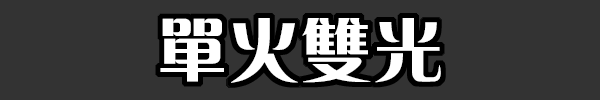
<style>
.page{position:relative;width:600px;height:100px;background:#333333}
.page>*{position:absolute;margin:0}
.t1{font:72px "MEllanHK-Xbold";color:#ffffff}
</style>
<div class="page">
<p class="t1" style="left:160px;top:18px;width:281px;height:65px">單火雙光</p>
</div>
